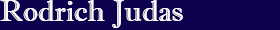
<style>
.page{position:relative;width:280px;height:30px;background:#0d004c}
.page>*{position:absolute;margin:0}
.t1{font:30px "ImprintMT-Shadow";color:#ffffff}
</style>
<div class="page">
<p class="t1" style="left:0px;top:0px;width:183px;height:28px">Rodrich Judas</p>
</div>
